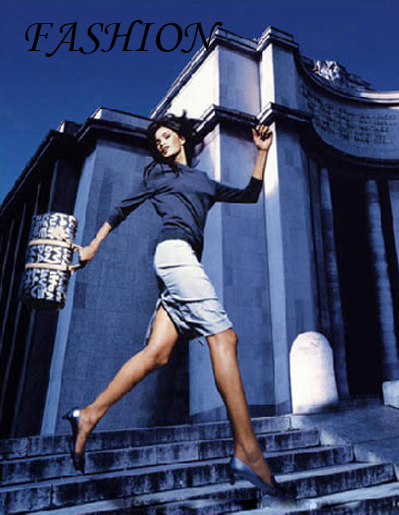
<style>
.page{position:relative;width:399px;height:515px}
.page>*{position:absolute;margin:0}
.t1{font:48px "MonotypeCorsiva";color:#000000}
</style>
<div class="page">
<p class="t1" style="left:25px;top:20px;width:198px;height:37px">FASHION</p>
</div>
